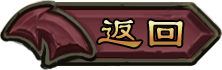
<style>
.page{position:relative;width:222px;height:70px}
.page>*{position:absolute;margin:0}
.t1{font:45.7px "LiSu"}
</style>
<div class="page">
<p class="t1" style="left:98px;top:20px;width:85px;height:28px">返回</p>
</div>
